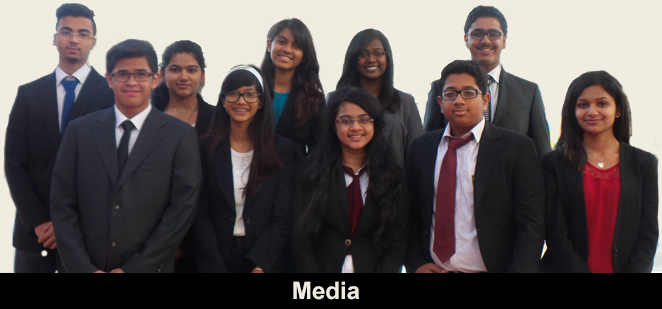
<style>
.page{position:relative;width:662px;height:309px}
.page>*{position:absolute;margin:0}
.t1{font:24px "Arial-BoldMT";color:#f0ece1}
</style>
<div class="page">
<p class="t1" style="left:293px;top:281px;width:67px;height:19px">Media</p>
</div>
